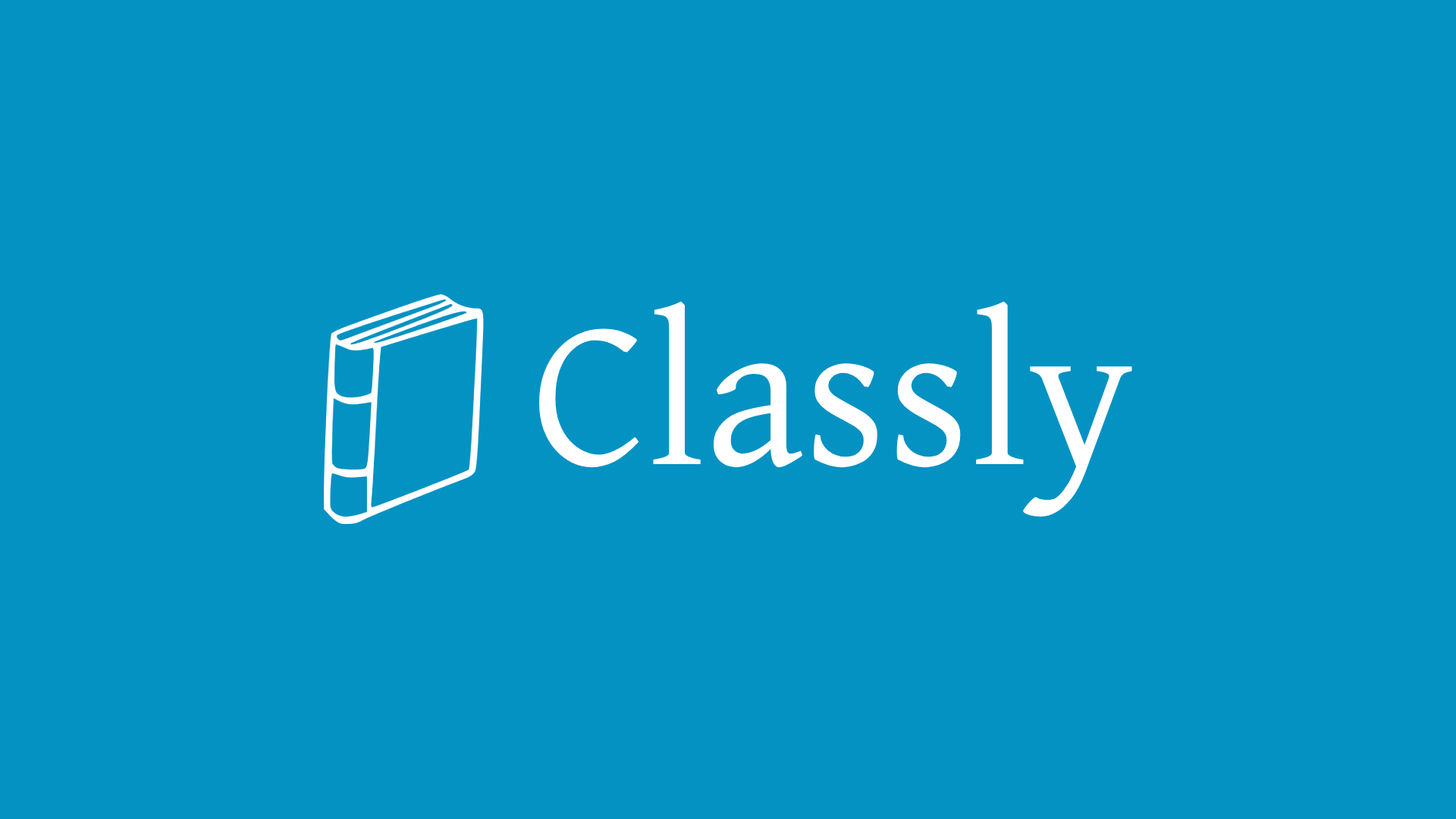
<style>
.page{position:relative;width:1456px;height:819px;background:#0492c2}
.page>*{position:absolute;margin:0}
.t1{font:214.8px "GentiumPlus";color:#ffffff}
</style>
<div class="page">
<p class="t1" style="left:539px;top:301px;width:593px;height:216px">Classly</p>
</div>
